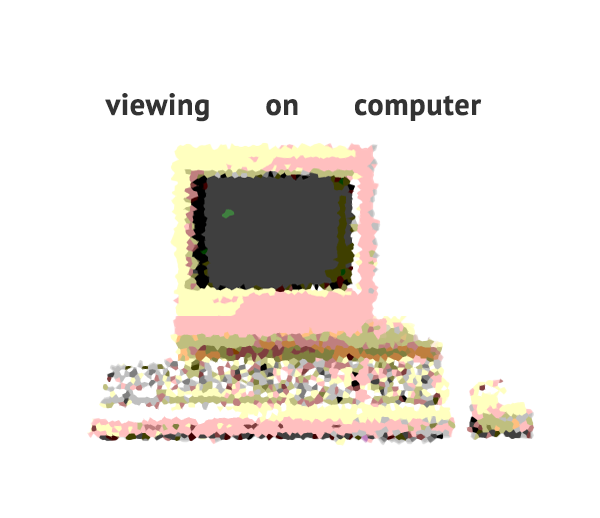
<style>
.page{position:relative;width:600px;height:518px;background:#ffffff}
.page>*{position:absolute;margin:0}
.t1{font:30px "PTSans-Bold";color:#333333;font-weight:bold}
</style>
<div class="page">
<p class="t1" style="left:105px;top:93px;width:377px;height:29px">viewing on computer</p>
</div>
